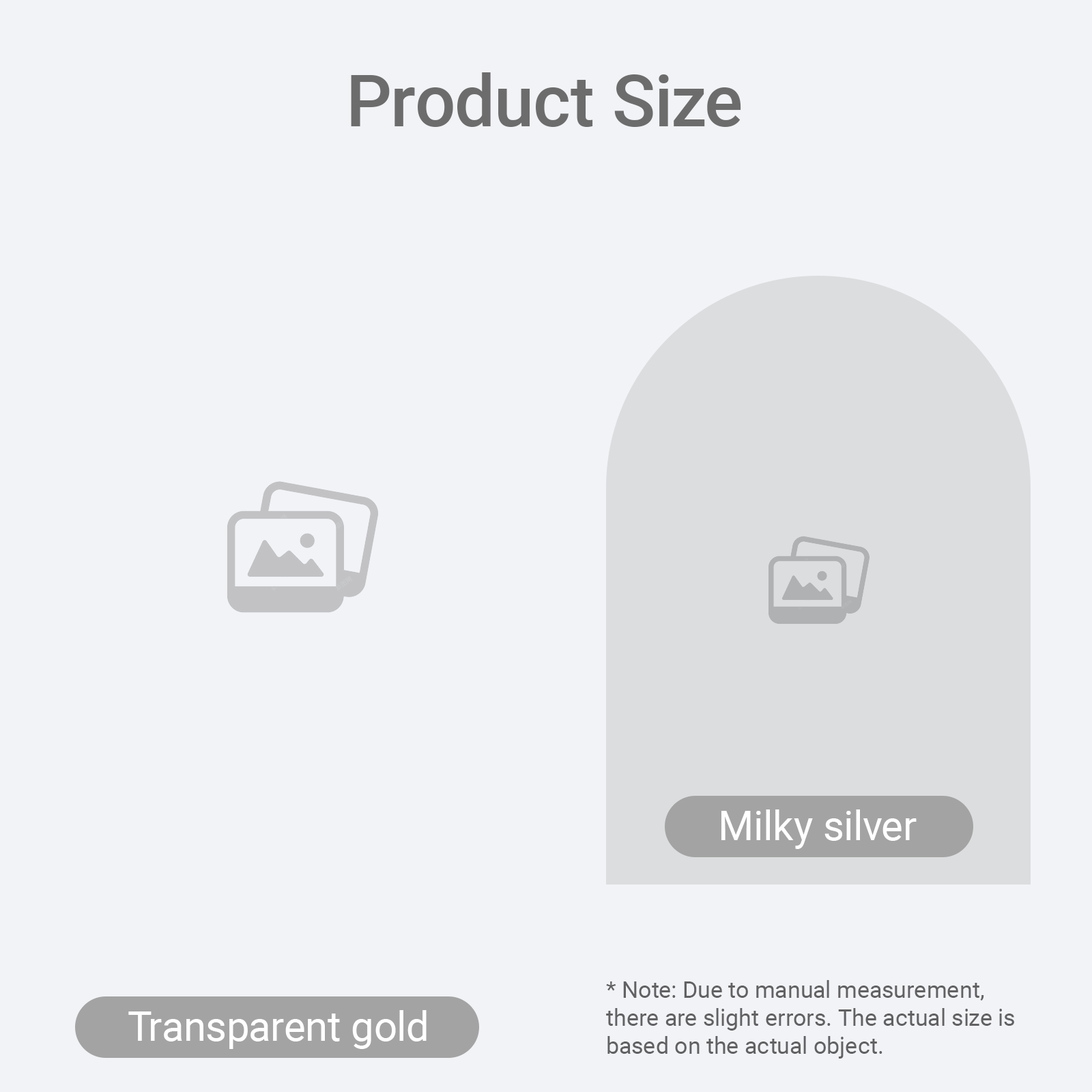
<style>
.page{position:relative;width:1092px;height:1092px;background:#f2f3f6}
.page>*{position:absolute;margin:0}
.t1{font:71.3px "Roboto-Medium";color:#6c6c6c}
.t2{font:40.8px "Roboto-Regular";color:#ffffff}
.t3{font:23.3px "Roboto-Regular";color:#616163}
</style>
<div class="page">
<p class="t1" style="left:351px;top:72px;width:390px;height:55px">Product Size</p>
<p class="t2" style="left:721px;top:809px;width:196px;height:40px">Milky silver</p>
<p class="t3" style="left:606px;top:980px;width:408px;height:79px">* Note: Due to manual measurement, there are slight errors. The actual size is based on the actual object.</p>
<p class="t2" style="left:128px;top:1010px;width:299px;height:39px">Transparent gold</p>
</div>
